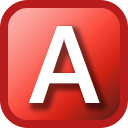
<style>
.page{position:relative;width:128px;height:128px;background:#b71c1c}
.page>*{position:absolute;margin:0}
.t1{font:110px "SegoeUI-SemiBold";color:#ffffff}
</style>
<div class="page">
<p class="t1" style="left:29px;top:26px;width:71px;height:77px">A</p>
</div>
